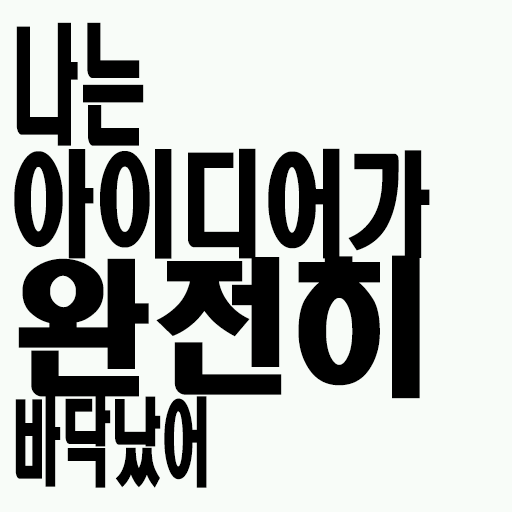
<style>
.page{position:relative;width:512px;height:512px;background:#f8fcf8}
.page>*{position:absolute;margin:0}
.t1{font:114px/120px "HeadlineR-HM";color:#000000;scale:0.74 1}
.t2{font:129.2px/120px "HeadlineR-HM";color:#000000;scale:0.53 1}
.t3{font:148.2px/120px "HeadlineR-HM";color:#000000;scale:0.95 1}
.t4{font:95px/120px "HeadlineR-HM";color:#000000;scale:0.53 1}
</style>
<div class="page">
<p class="t1" style="left:14px;top:22px;width:416px;height:466px"><span class="t2">나는<br></span>아이디어가<br><span class="t3">완전히<br></span><span class="t4">바닥났어</span></p>
</div>
